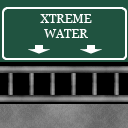
<style>
.page{position:relative;width:128px;height:128px;background:#205340}
.page>*{position:absolute;margin:0}
.t1{font:12px "Georgia";color:#ffffff}
</style>
<div class="page">
<p class="t1" style="left:40px;top:14px;width:52px;height:24px;text-align:center">XTREME<br>WATER</p>
</div>
